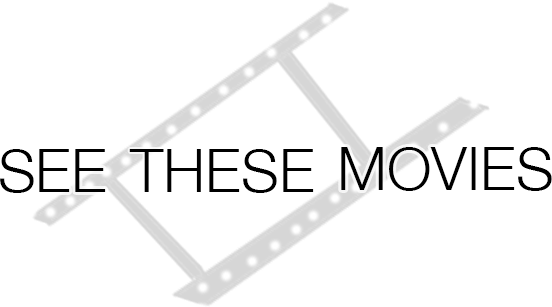
<style>
.page{position:relative;width:552px;height:307px;background:#ffffff}
.page>*{position:absolute;margin:0}
.t1{font:60px "HelveticaNeue-Light";color:#000000}
.t2{font:60.3px "HelveticaNeue-Light";color:#000000}
</style>
<div class="page">
<p class="t1" style="left:0px;top:149px;width:106px;height:44px">SEE</p>
<p class="t2" style="left:129px;top:149px;width:185px;height:44px">THESE</p>
<p class="t1" style="left:341px;top:147px;width:211px;height:44px">MOVIES</p>
</div>
